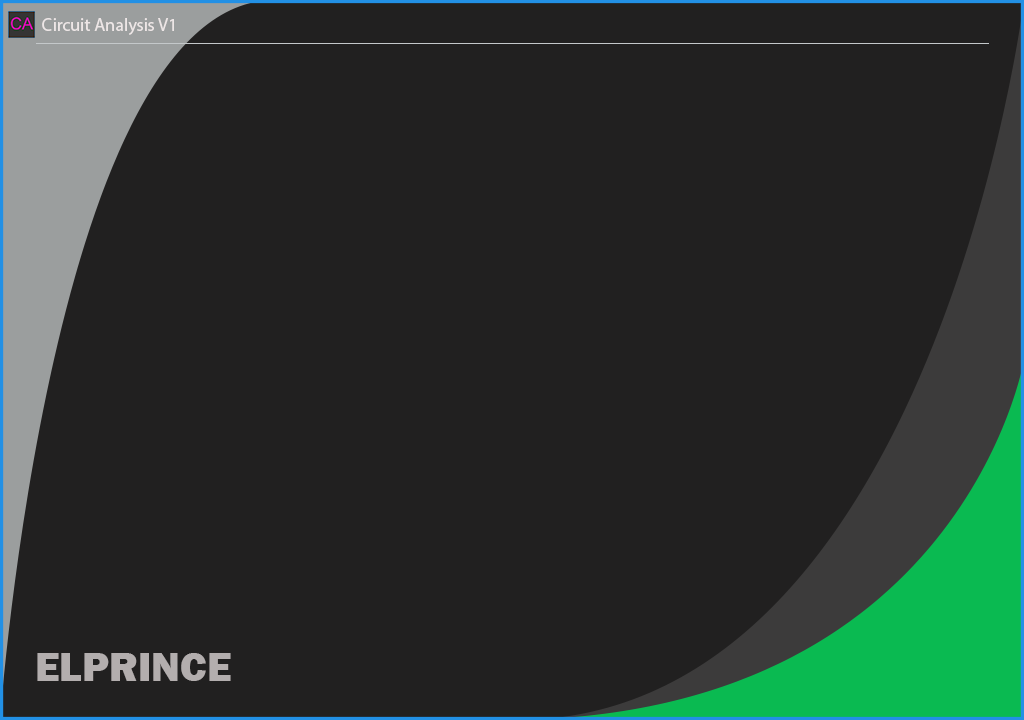
<style>
.page{position:relative;width:1024px;height:720px;background:#212020}
.page>*{position:absolute;margin:0}
.t1{font:18px "MyriadPro-Regular";color:#ede6e6}
.t2{font:42px "FranklinGothic-Heavy";color:#b3aeae}
</style>
<div class="page">
<p class="t1" style="left:42px;top:18px;width:132px;height:17px">Circuit Analysis V1</p>
<p class="t2" style="left:37px;top:653px;width:194px;height:28px">ELPRINCE</p>
</div>
